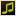
<style>
.page{position:relative;width:16px;height:16px;background:#ebdbb2}
.page>*{position:absolute;margin:0}
.t1{font:13.2px "LucidaConsole";color:#b8bb26;scale:1.54 1}
</style>
<div class="page">
<p class="t1" style="left:2px;top:2px;width:12px;height:12px">♫</p>
</div>
